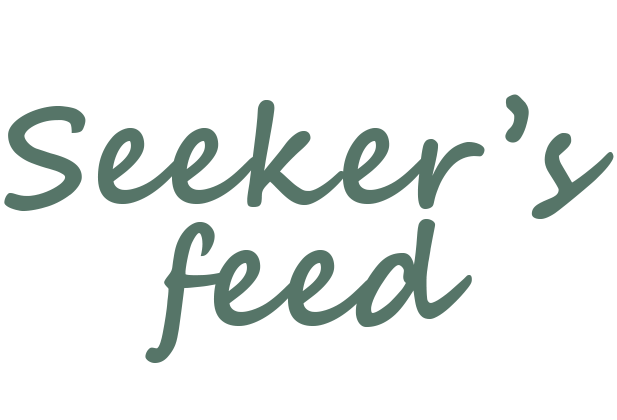
<style>
.page{position:relative;width:617px;height:420px;background:#ffffff}
.page>*{position:absolute;margin:0}
.t1{font:140px "SegoeScript-Bold";color:#567568}
</style>
<div class="page">
<p class="t1" style="left:4px;top:94px;width:610px;height:125px">Seeker’s</p>
<p class="t1" style="left:145px;top:219px;width:327px;height:144px">feed</p>
</div>
